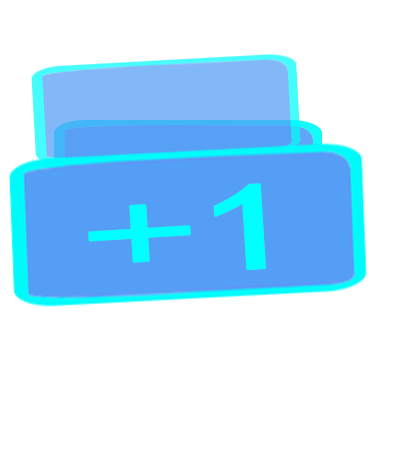
<style>
.page{position:relative;width:404px;height:450px;background:#ffffff}
.page>*{position:absolute;margin:0}
.t1{font:124.7px "SimHei";letter-spacing:-0.025em;color:#00ffff;font-weight:bold;scale:1.79 1}
</style>
<div class="page">
<p class="t1" style="left:88px;top:183px;width:178px;height:88px;rotate:-4deg">+1</p>
</div>
